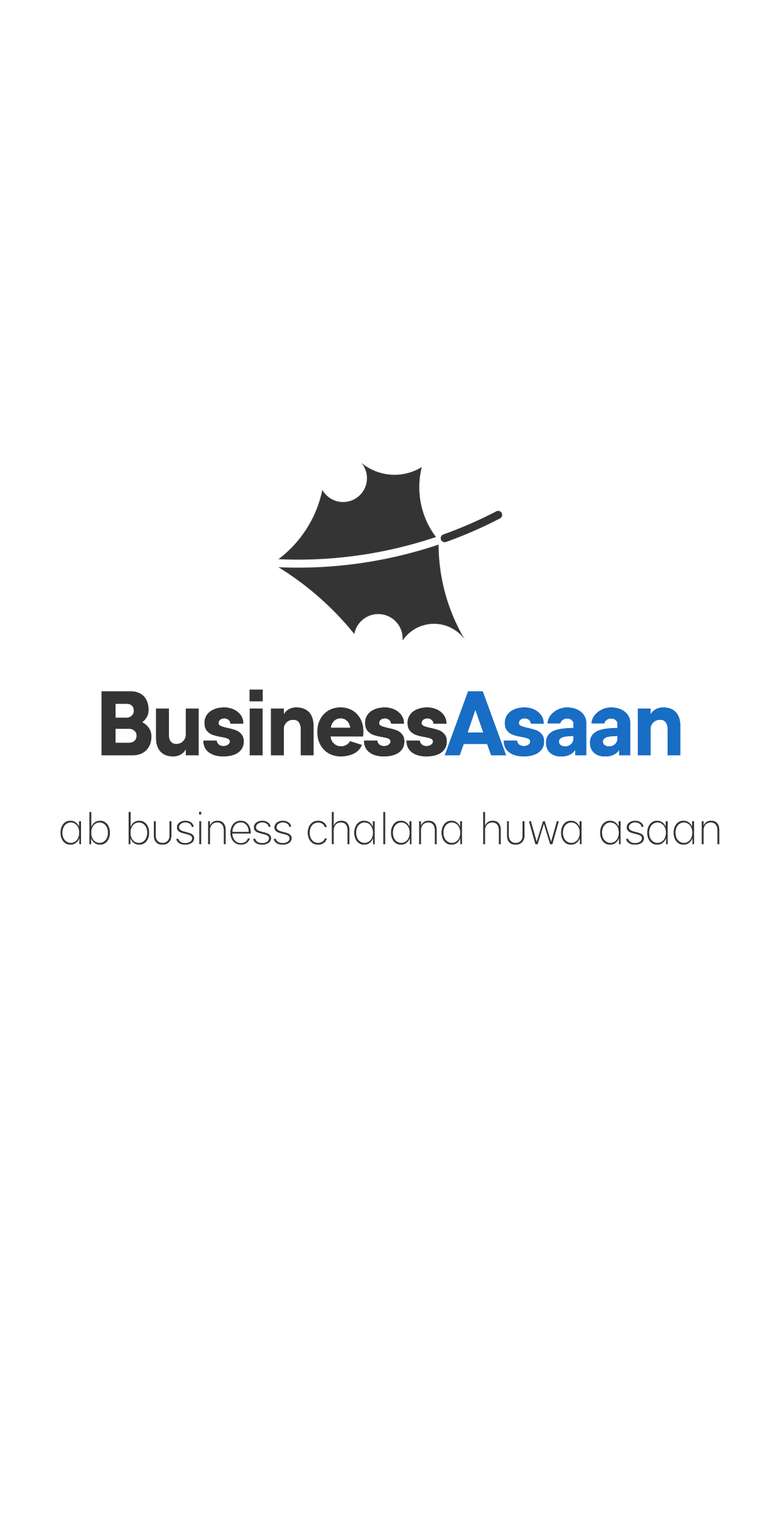
<style>
.page{position:relative;width:780px;height:1529px;background:#ffffff}
.page>*{position:absolute;margin:0}
.t1{font:89.6px "Genera-SemiBold";letter-spacing:-0.05em;color:#343434}
.t2{font:89.6px "Genera-SemiBold";letter-spacing:-0.05em;color:#186dc4}
.t3{font:45.2px "Genera-AltLight";letter-spacing:-0.05em;color:#343434}
</style>
<div class="page">
<p class="t1" style="left:101px;top:689px;width:580px;height:68px">Business<span class="t2">Asaan</span></p>
<p class="t3" style="left:60px;top:812px;width:659px;height:33px">ab business chalana huwa asaan</p>
</div>
